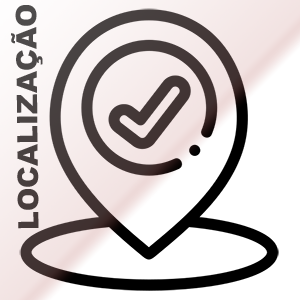
<style>
.page{position:relative;width:300px;height:300px;background:#ffffff}
.page>*{position:absolute;margin:0}
.t1{font:28.3px "Arial-Black";color:#4b4545}
</style>
<div class="page">
<p class="t1" style="left:11px;top:5px;width:32px;height:224px;rotate:-91deg">LOCALIZAÇÃO</p>
</div>
